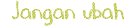
<style>
.page{position:relative;width:135px;height:28px;background:#ffffff}
.page>*{position:absolute;margin:0}
.t1{font:24px "DJBChalkItUp";letter-spacing:-0.01em;color:#c6cd64}
</style>
<div class="page">
<p class="t1" style="left:11px;top:0px;width:113px;height:26px">Jangan ubah</p>
</div>
